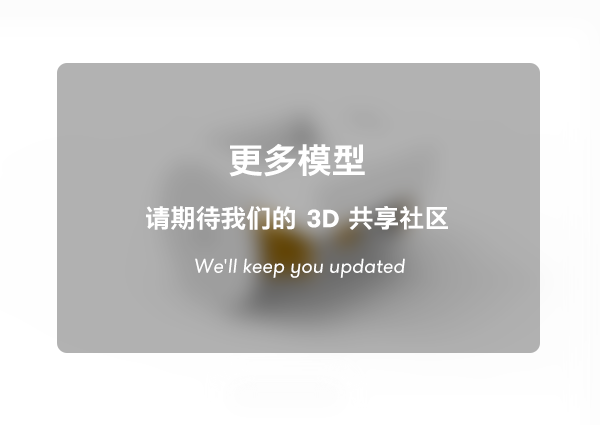
<style>
.page{position:relative;width:600px;height:425px}
.page>*{position:absolute;margin:0}
.t1{font:40px "PingHei-Bold";letter-spacing:0.04em;color:#ffffff}
.t2{font:29.4px "PingHei-Bold";letter-spacing:0.04em;color:#ffffff}
.t3{font:25px "GTWalsheimProTrial-Bold";color:#ffffff}
.t4{font:20px "GTWalsheimProTrialRegular-Oblique";color:#ffffff}
.t5{font:20px "MyriadPro-Regular";color:#ffffff}
</style>
<div class="page">
<p class="t1" style="left:229px;top:143px;width:136px;height:34px">更多模型</p>
<p class="t2" style="left:146px;top:206px;width:302px;height:24px">请期待我们的 <span class="t3">3D</span> 共享社区</p>
<p class="t4" style="left:195px;top:258px;width:210px;height:20px">We<span class="t5">'</span>ll keep you updated</p>
</div>
